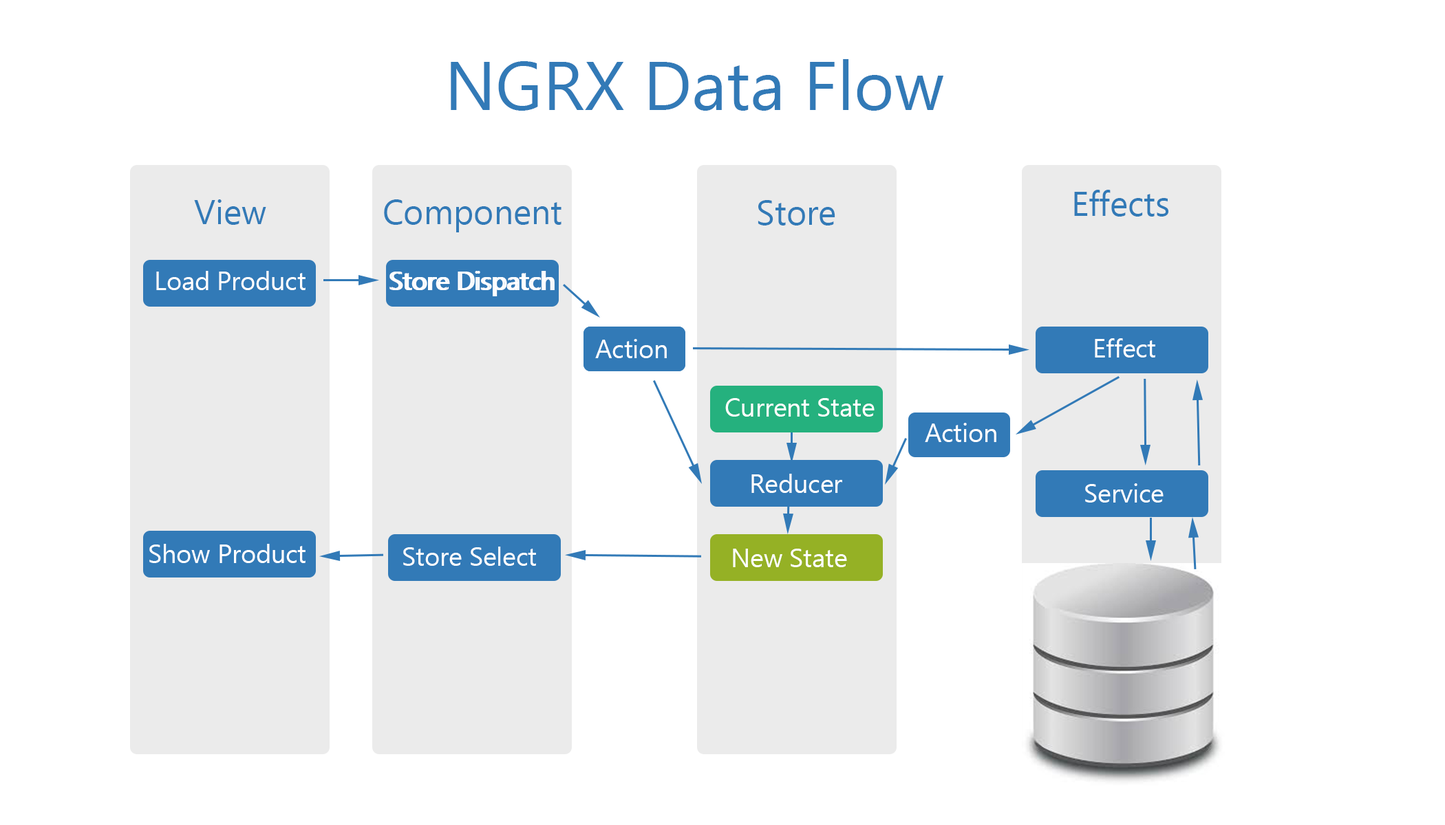
<style>
.page{position:relative;width:1445px;height:825px;background:#ffffff}
.page>*{position:absolute;margin:0}
.t1{font:68.8px "Ebrima";color:#327ab7}
.t2{font:34.4px "Ebrima";color:#327ab7}
.t3{font:25.8px "Ebrima";color:#ffffff}
</style>
<div class="page">
<p class="t1" style="left:451px;top:59px;width:492px;height:52px">NGRX Data Flow</p>
<p class="t2" style="left:1074px;top:190px;width:94px;height:27px">Effects</p>
<p class="t2" style="left:194px;top:199px;width:72px;height:26px">View</p>
<p class="t2" style="left:384px;top:199px;width:177px;height:34px">Component</p>
<p class="t2" style="left:757px;top:200px;width:78px;height:26px">Store</p>
<p class="t3" style="left:156px;top:271px;width:149px;height:19px">Load Product</p>
<p class="t3" style="left:389px;top:271px;width:163px;height:25px">Store Dispatch</p>
<p class="t3" style="left:391px;top:271px;width:163px;height:25px">Store Dispatch</p>
<p class="t3" style="left:595px;top:339px;width:72px;height:19px">Action</p>
<p class="t3" style="left:1094px;top:338px;width:61px;height:20px">Effect</p>
<p class="t3" style="left:725px;top:398px;width:149px;height:19px">Current State</p>
<p class="t3" style="left:925px;top:423px;width:71px;height:19px">Action</p>
<p class="t3" style="left:751px;top:474px;width:91px;height:19px">Reducer</p>
<p class="t3" style="left:1085px;top:484px;width:78px;height:19px">Service</p>
<p class="t3" style="left:149px;top:544px;width:156px;height:19px">Show Product</p>
<p class="t3" style="left:403px;top:547px;width:133px;height:19px">Store Select</p>
<p class="t3" style="left:733px;top:549px;width:114px;height:19px">New State</p>
</div>
